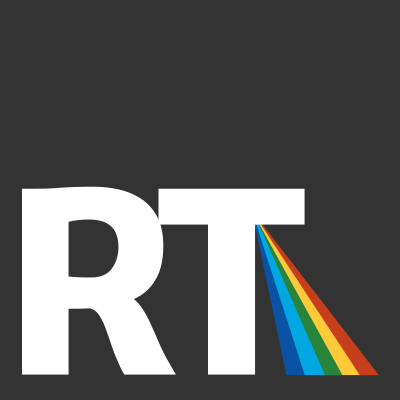
<style>
.page{position:relative;width:400px;height:400px;background:#333333}
.page>*{position:absolute;margin:0}
.t1{font:250px "MerriweatherSansRoman-ExtraBold";color:#ffffff}
</style>
<div class="page">
<p class="t1" style="left:22px;top:186px;width:283px;height:189px">RT</p>
</div>
